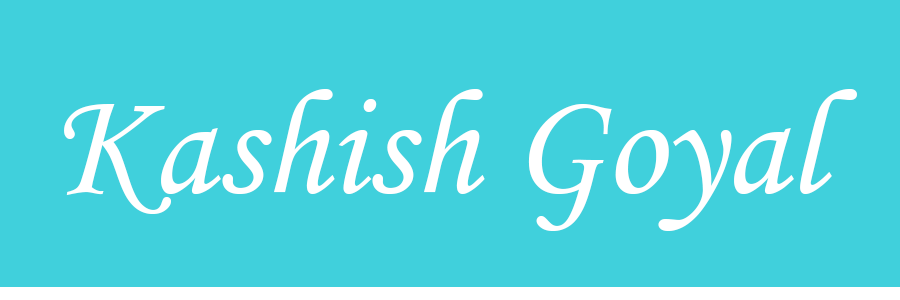
<style>
.page{position:relative;width:900px;height:300px;background:#40d0dc}
.page>*{position:absolute;margin:0}
.t1{font:150px "MonotypeCorsiva";color:#ffffff}
</style>
<div class="page">
<p class="t1" style="left:64px;top:89px;width:793px;height:142px">Kashish Goyal</p>
</div>
